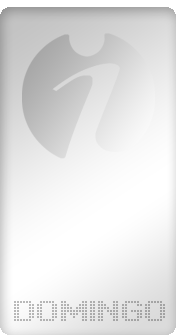
<style>
.page{position:relative;width:176px;height:335px}
.page>*{position:absolute;margin:0}
.t1{font:36px "TenacityHR48Bold";letter-spacing:-0.1em;color:#acacac}
</style>
<div class="page">
<p class="t1" style="left:14px;top:301px;width:151px;height:20px">DOMINGO</p>
</div>
